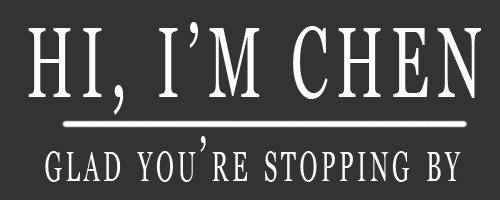
<style>
.page{position:relative;width:500px;height:200px;background:#333333}
.page>*{position:absolute;margin:0}
.t1{font:100.4px "Georgia";letter-spacing:0.14em;color:#fcfcfc;text-transform:uppercase;scale:0.57 1}
.t2{font:60.2px "Georgia";letter-spacing:0.14em;color:#fcfcfc;font-variant:small-caps;scale:0.57 1}
</style>
<div class="page">
<p class="t1" style="left:28px;top:22px;width:453px;height:93px">Hi, I’m Chen</p>
<p class="t2" style="left:45px;top:136px;width:416px;height:46px">glad you’re stopping by</p>
</div>
